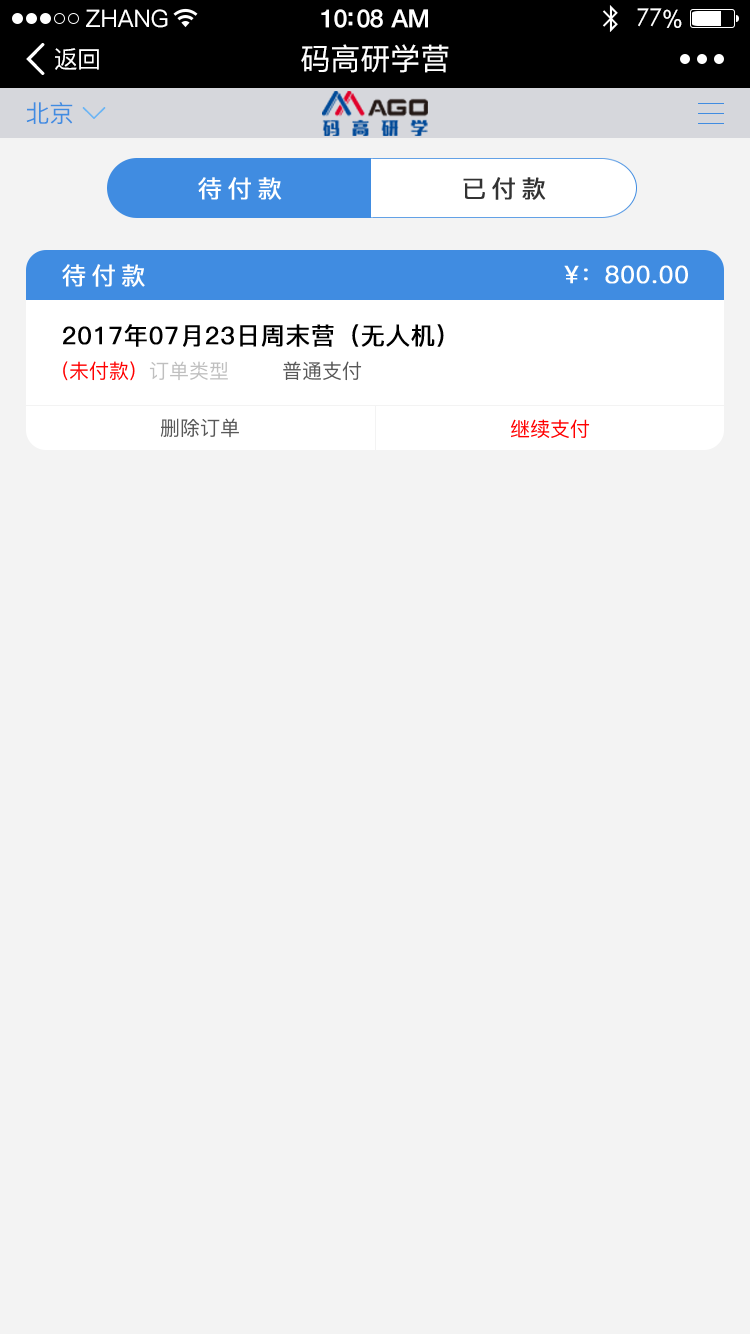
<style>
.page{position:relative;width:750px;height:1334px;background:#f3f3f3}
.page>*{position:absolute;margin:0}
.t1{font:24px "PingFang-SC-Medium";color:#ffffff}
.t2{font:25px "HelveticaNeue-Medium";letter-spacing:-0.02em;color:#ffffff}
.t3{font:24px "STXihei";letter-spacing:-0.02em;color:#ffffff}
.t4{font:24px "ArialUnicodeMS";letter-spacing:-0.02em;color:#ffffff}
.t5{font:24px "PingFang-SC-Medium";letter-spacing:-0.02em;color:#ffffff}
.t6{font:30px "PingFang-SC-Medium";color:#ffffff}
.t7{font:24px "PingFang-SC-Medium";color:#408ce1}
.t8{font:24px "PingFang-SC-Medium";letter-spacing:0.2em;color:#ffffff;font-weight:bold}
.t9{font:24px "PingFang-SC-Medium";letter-spacing:0.2em;color:#333333;font-weight:bold}
.t10{font:24px "PingFang-SC-Medium";color:#ffffff;font-weight:bold}
.t11{font:24px "PingFang-SC-Medium";color:#000000;font-weight:bold}
.t12{font:20px "PingFang-SC-Medium";color:#ff0000}
.t13{font:20px "PingFang-SC-Medium";color:#bfbfbf}
.t14{font:20px "PingFang-SC-Medium";color:#585858}
</style>
<div class="page">
<p class="t1" style="left:86px;top:9px;width:82px;height:19px">ZHANG</p>
<p class="t2" style="left:321px;top:9px;width:107px;height:19px">10:08 AM</p>
<p class="t3" style="left:637px;top:8px;width:45px;height:20px">77<span class="t4">%</span></p>
<p class="t5" style="left:55px;top:48px;width:44px;height:22px">返回</p>
<p class="t6" style="left:301px;top:44px;width:148px;height:29px">码高研学营</p>
<p class="t7" style="left:26px;top:102px;width:47px;height:22px">北京</p>
<p class="t8" style="left:198px;top:177px;width:84px;height:23px">待付款</p>
<p class="t9" style="left:463px;top:177px;width:83px;height:23px">已付款</p>
<p class="t8" style="left:62px;top:264px;width:83px;height:23px">待付款</p>
<p class="t10" style="left:564px;top:265px;width:124px;height:19px">¥：800.00</p>
<p class="t11" style="left:63px;top:324px;width:381px;height:23px">2017年07月23日周末营（无人机）</p>
<p class="t12" style="left:63px;top:361px;width:299px;height:20px">(未付款)  <span class="t13">订单类型        </span><span class="t14">普通支付</span></p>
<p class="t14" style="left:160px;top:418px;width:79px;height:20px">删除订单</p>
<p class="t12" style="left:511px;top:419px;width:79px;height:20px">继续支付</p>
</div>
